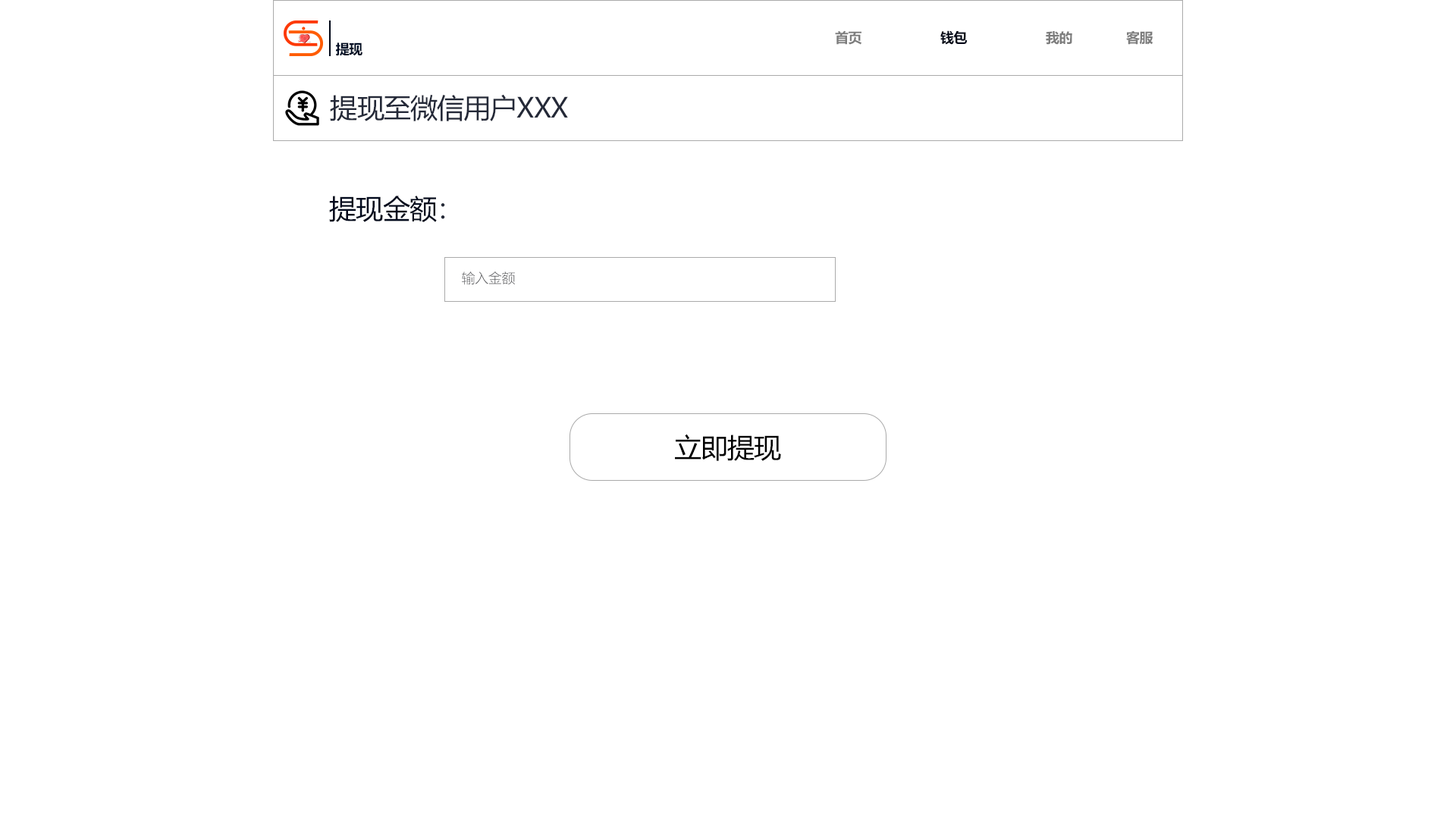
<style>
.page{position:relative;width:1456px;height:819px;background:#ffffff}
.page>*{position:absolute;margin:0}
.t1{font:13.6px "MicrosoftYaHei-Bold";letter-spacing:-0.024em;color:#7d7d7d}
.t2{font:13.6px "MicrosoftYaHei-Bold";letter-spacing:-0.024em;color:#010717}
.t3{font:13.6px "MicrosoftYaHei-Bold";letter-spacing:-0.024em;color:#010e25}
.t4{font:27.3px "MicrosoftYaHei";letter-spacing:-0.024em;color:#242938}
.t5{font:27.3px "MicrosoftYaHei";letter-spacing:-0.024em;color:#01091d}
.t6{font:13.6px "MicrosoftYaHeiLight";letter-spacing:-0.024em;color:#5a5b5e}
.t7{font:27.3px "MicrosoftYaHei";letter-spacing:-0.024em;color:#000000}
</style>
<div class="page">
<p class="t1" style="left:835px;top:30px;width:26px;height:15px">首页</p>
<p class="t2" style="left:940px;top:30px;width:28px;height:15px">钱包</p>
<p class="t1" style="left:1046px;top:31px;width:26px;height:14px">我的</p>
<p class="t1" style="left:1126px;top:31px;width:27px;height:14px">客服</p>
<p class="t3" style="left:336px;top:42px;width:26px;height:14px">提现</p>
<p class="t4" style="left:330px;top:94px;width:238px;height:27px">提现至微信用户XXX</p>
<p class="t5" style="left:329px;top:196px;width:116px;height:26px">提现金额<span class="t4">：</span></p>
<p class="t6" style="left:462px;top:271px;width:53px;height:14px">输入金额</p>
<p class="t7" style="left:675px;top:434px;width:106px;height:27px">立即提现</p>
</div>
